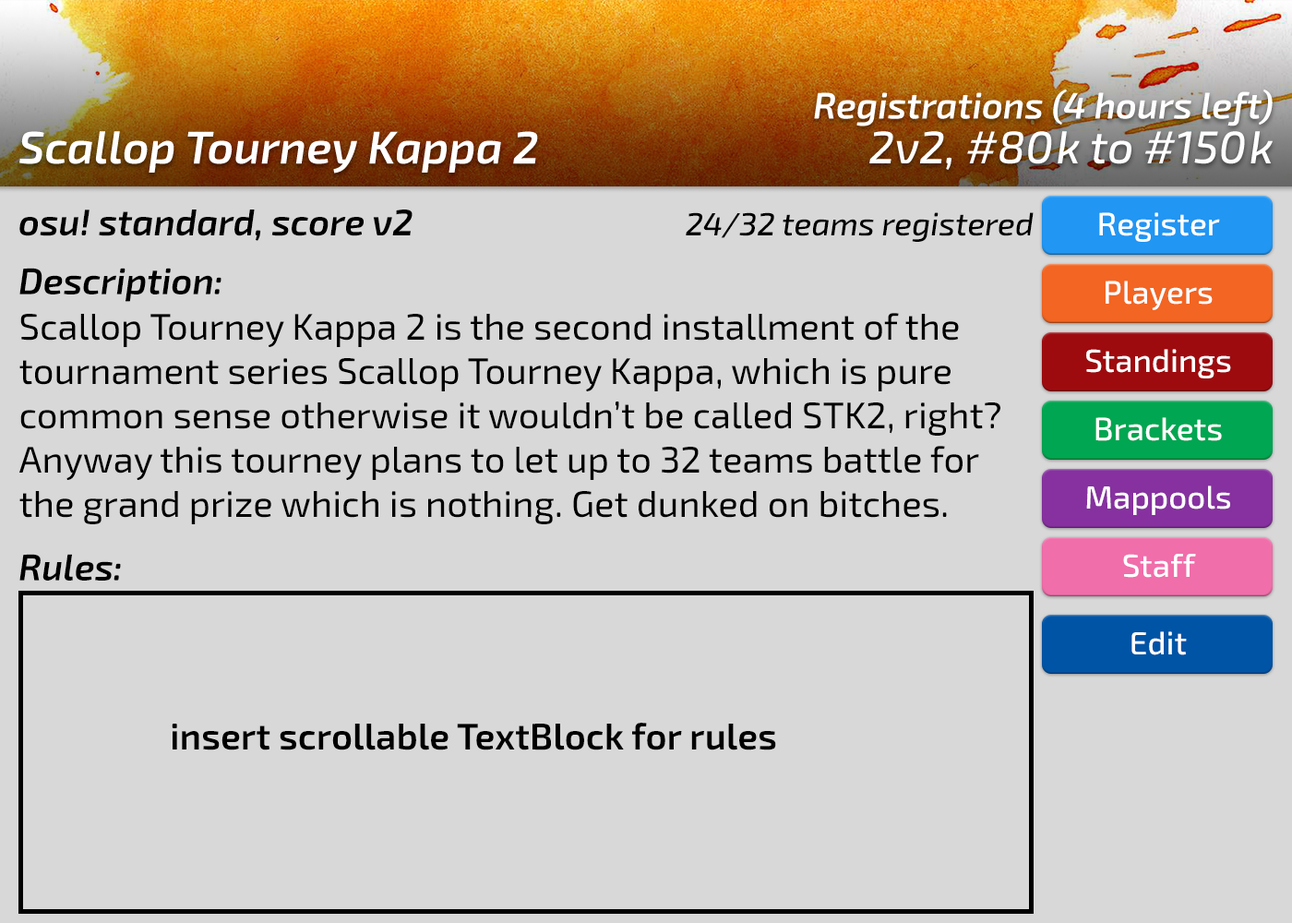
<style>
.page{position:relative;width:1292px;height:923px;background:#d8d8d8}
.page>*{position:absolute;margin:0}
.t1{font:36.9px "Exo2-SemiBoldItalic";color:#ffffff}
.t2{font:46.1px "Exo2-SemiBoldItalic";color:#ffffff}
.t3{font:46.1px "Exo2-MediumItalic";color:#ffffff}
.t4{font:36.9px "Exo2-SemiBoldItalic";color:#000000}
.t5{font:32.3px "Exo2-MediumItalic";color:#000000}
.t6{font:32.3px "Exo2-Medium";color:#ffffff}
.t7{font:36.9px "Exo2-Regular";color:#000000}
.t8{font:36.9px "Exo2-SemiBold";color:#000000}
</style>
<div class="page">
<p class="t1" style="left:814px;top:89px;width:459px;height:37px">Registrations (4 hours left)</p>
<p class="t2" style="left:19px;top:131px;width:519px;height:43px">Scallop Tourney Kappa 2</p>
<p class="t3" style="left:869px;top:131px;width:404px;height:39px">2v2, #80k to #150k</p>
<p class="t4" style="left:19px;top:209px;width:394px;height:32px">osu! standard, score v2</p>
<p class="t5" style="left:686px;top:212px;width:348px;height:30px">24/32 teams registered</p>
<p class="t6" style="left:1099px;top:212px;width:121px;height:30px">Register</p>
<p class="t4" style="left:19px;top:268px;width:202px;height:34px">Description:</p>
<p class="t6" style="left:1106px;top:281px;width:107px;height:29px">Players</p>
<p class="t7" style="left:19px;top:313px;width:981px;height:211px">Scallop Tourney Kappa 2 is the second installment of the tournament series Scallop Tourney Kappa, which is pure common sense otherwise it wouldn’t be called STK2, right? Anyway this tourney plans to let up to 32 teams battle for the grand prize which is nothing. Get dunked on bitches.</p>
<p class="t6" style="left:1086px;top:349px;width:145px;height:29px">Standings</p>
<p class="t6" style="left:1095px;top:417px;width:127px;height:24px">Brackets</p>
<p class="t6" style="left:1086px;top:485px;width:144px;height:30px">Mappools</p>
<p class="t4" style="left:19px;top:554px;width:102px;height:27px">Rules:</p>
<p class="t6" style="left:1123px;top:554px;width:73px;height:24px">Staff</p>
<p class="t6" style="left:1131px;top:631px;width:56px;height:24px">Edit</p>
<p class="t8" style="left:172px;top:723px;width:604px;height:27px">insert scrollable TextBlock for rules</p>
</div>
